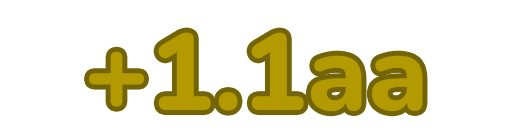
<style>
.page{position:relative;width:512px;height:134px;background:#ffffff}
.page>*{position:absolute;margin:0}
.t1{font:108.3px "Nunito-ExtraBold";color:#b29a00}
</style>
<div class="page">
<p class="t1" style="left:89px;top:32px;width:334px;height:80px">+1.1aa</p>
</div>
